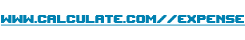
<style>
.page{position:relative;width:245px;height:40px;background:#ffffff}
.page>*{position:absolute;margin:0}
.t1{font:16px "UpheavalTT-BRK-";color:#0081b1;text-decoration:underline}
</style>
<div class="page">
<p class="t1" style="left:0px;top:15px;width:245px;height:11px">www.calculate.com//expense</p>
</div>
